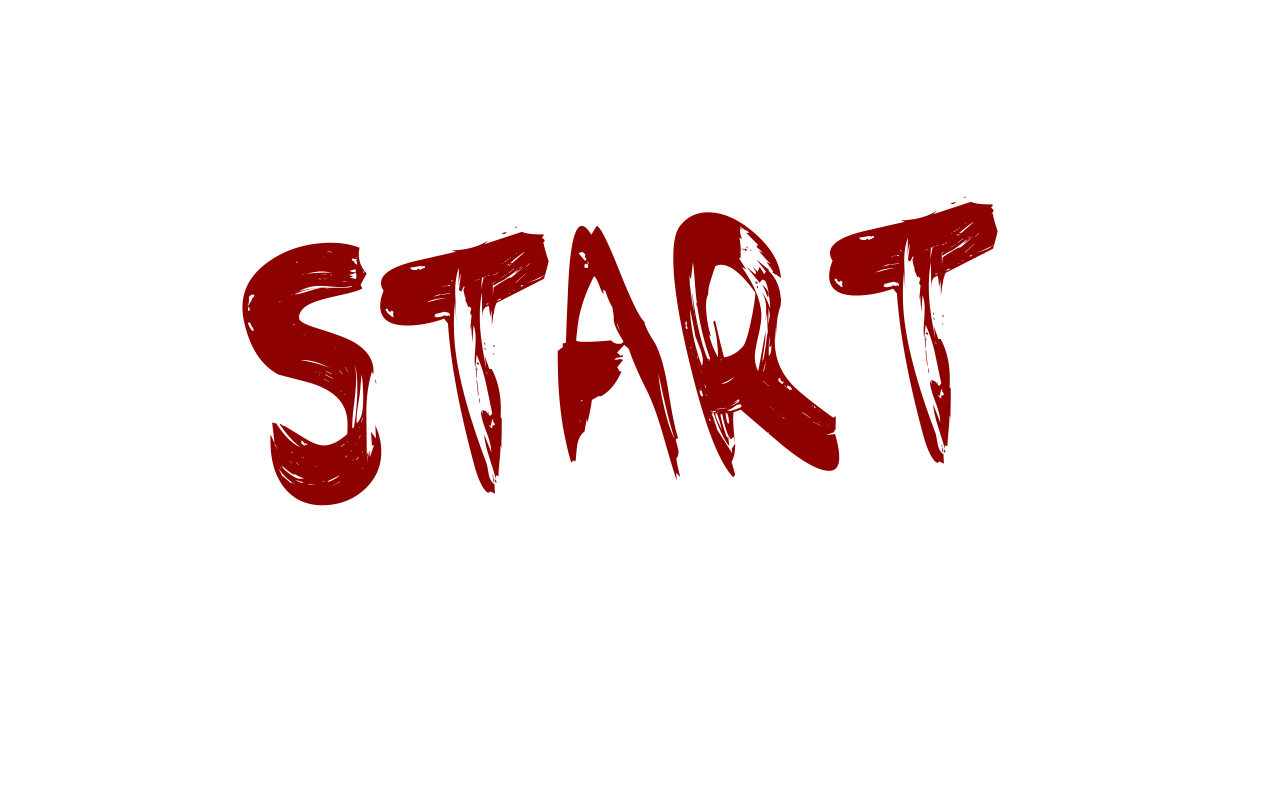
<style>
.page{position:relative;width:1276px;height:794px;background:#ffffff}
.page>*{position:absolute;margin:0}
.t1{font:264.9px "Brushed";color:#8d0101}
</style>
<div class="page">
<p class="t1" style="left:242px;top:196px;width:756px;height:310px;rotate:-4deg">start</p>
</div>
